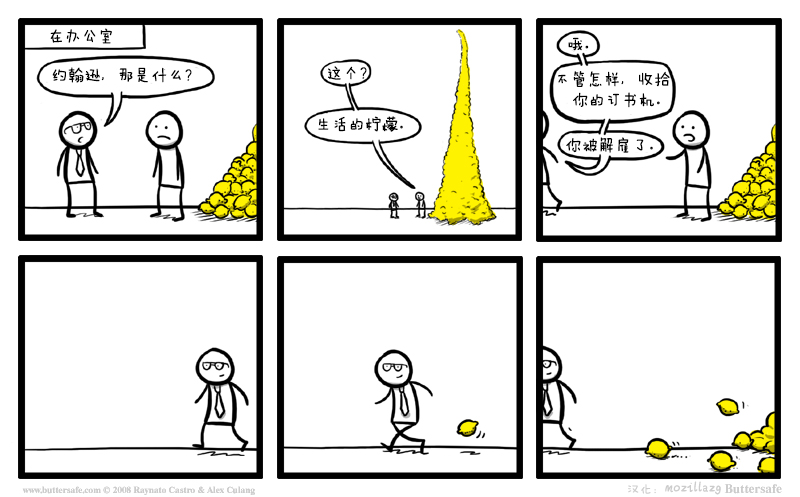
<style>
.page{position:relative;width:800px;height:497px;background:#ffffff}
.page>*{position:absolute;margin:0}
.t1{font:16.7px "FZMWJW--GB1-0";color:#000000}
.t2{font:16.7px/20.8px "FZMWJW--GB1-0";color:#000000}
.t3{font:16.7px "FZMWJW--GB1-0";color:#cccccc}
.t4{font:12.5px "FZMWJW--GB1-0";color:#cccccc}
</style>
<div class="page">
<p class="t1" style="left:50px;top:28px;width:62px;height:16px">在办公室</p>
<p class="t1" style="left:568px;top:37px;width:21px;height:14px">哦。</p>
<p class="t1" style="left:52px;top:67px;width:140px;height:16px">约翰逊，那是什么？</p>
<p class="t1" style="left:328px;top:66px;width:39px;height:14px">这个？</p>
<p class="t2" style="left:558px;top:71px;width:112px;height:37px">不管怎样，收拾<br>   你的订书机。</p>
<p class="t1" style="left:318px;top:116px;width:85px;height:16px">生活的柠檬。</p>
<p class="t1" style="left:566px;top:137px;width:87px;height:16px">你被解雇了。</p>
<p class="t3" style="left:628px;top:481px;width:93px;height:14px"><span class="t4">汉化：</span>mozillazg</p>
</div>
